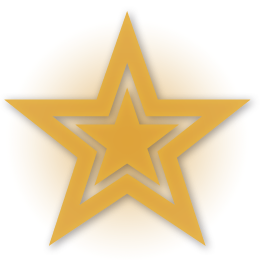
<style>
.page{position:relative;width:260px;height:260px;background:#ffffff}
.page>*{position:absolute;margin:0}
.t1{font:334.5px "Meiryo";color:#dda032}
</style>
<div class="page">
<p class="t1" style="left:4px;top:11px;width:247px;height:235px;opacity:0.88">✮</p>
</div>
